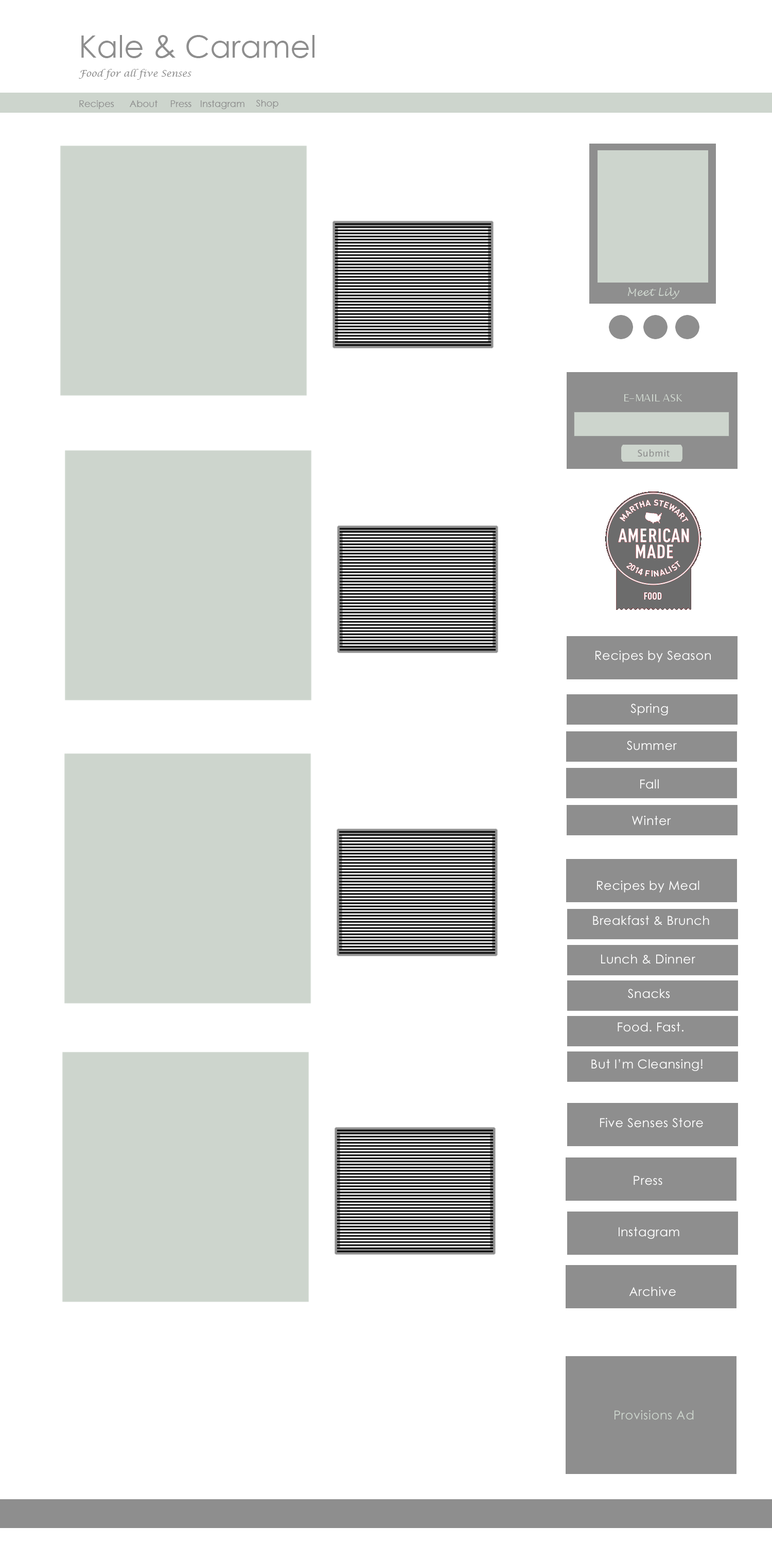
<style>
.page{position:relative;width:772px;height:1544px;background:#ffffff}
.page>*{position:absolute;margin:0}
.t1{font:30.9px "CenturyGothic";color:#8e8e8e}
.t2{font:9.3px "LucidaCalligraphy-Italic";color:#8e8e8e}
.t3{font:9.3px "CenturyGothic";color:#8e8e8e}
.t4{font:9.3px "LucidaSansUnicode";letter-spacing:0.025em;color:#8e8e8e}
.t5{font:12.4px "CenturyGothic";letter-spacing:0.025em;color:#ffffff}
.t6{font:12.4px "CenturyGothic";letter-spacing:0.025em;color:#cdd5cd}
</style>
<div class="page">
<p class="t1" style="left:81px;top:35px;width:234px;height:23px">Kale &amp; Caramel</p>
<p class="t2" style="left:79px;top:69px;width:112px;height:11px">Food for all five Senses</p>
<p class="t3" style="left:79px;top:100px;width:35px;height:9px">Recipes</p>
<p class="t3" style="left:130px;top:100px;width:28px;height:7px">About</p>
<p class="t3" style="left:171px;top:100px;width:20px;height:7px">Press</p>
<p class="t3" style="left:201px;top:100px;width:44px;height:9px">Instagram</p>
<p class="t3" style="left:256px;top:100px;width:22px;height:9px">Shop</p>
<p class="t4" style="left:638px;top:449px;width:32px;height:8px">Submit</p>
<p class="t5" style="left:596px;top:651px;width:115px;height:12px">Recipes by Season</p>
<p class="t5" style="left:631px;top:704px;width:37px;height:12px">Spring</p>
<p class="t5" style="left:627px;top:741px;width:50px;height:10px">Summer</p>
<p class="t5" style="left:640px;top:779px;width:19px;height:10px">Fall</p>
<p class="t5" style="left:632px;top:816px;width:39px;height:10px">Winter</p>
<p class="t5" style="left:597px;top:881px;width:103px;height:12px">Recipes by Meal</p>
<p class="t5" style="left:593px;top:916px;width:116px;height:10px">Breakfast &amp; Brunch</p>
<p class="t5" style="left:601px;top:954px;width:94px;height:10px">Lunch &amp; Dinner</p>
<p class="t5" style="left:628px;top:989px;width:42px;height:10px">Snacks</p>
<p class="t5" style="left:618px;top:1022px;width:66px;height:10px">Food. Fast.</p>
<p class="t5" style="left:591px;top:1059px;width:112px;height:12px">But I’m Cleansing!</p>
<p class="t5" style="left:600px;top:1118px;width:103px;height:10px">Five Senses Store</p>
<p class="t5" style="left:634px;top:1176px;width:29px;height:10px">Press</p>
<p class="t5" style="left:619px;top:1227px;width:60px;height:12px">Instagram</p>
<p class="t5" style="left:629px;top:1287px;width:47px;height:10px">Archive</p>
<p class="t6" style="left:615px;top:1410px;width:79px;height:10px">Provisions Ad</p>
</div>
